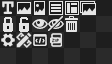
<style>
.page{position:relative;width:112px;height:64px;background:#1e1e1e}
.page>*{position:absolute;margin:0}
.t1{font:22px "CourierNewPS-BoldMT";color:#e5e5e5}
</style>
<div class="page">
<p class="t1" style="left:2px;top:1px;width:12px;height:13px">T</p>
</div>
